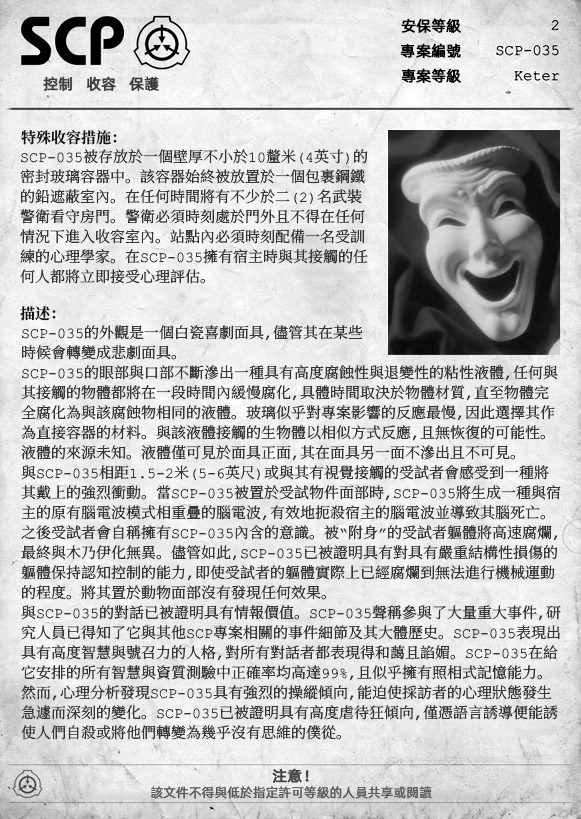
<style>
.page{position:relative;width:581px;height:819px}
.page>*{position:absolute;margin:0}
.t1{font:15px "AlibabaPuHuiTiR";color:#000000;font-weight:bold}
.t2{font:15px "AlibabaPuHuiTiR";color:#3d3d3d;font-weight:bold}
.t3{font:15px "ContainmentBreach-Bold";color:#121212}
.t4{font:15px/20px "ContainmentBreach-Regular";color:#353535}
.t5{font:15px "AlibabaPuHuiTiR";color:#414141;font-weight:bold}
.t6{font:13px "AlibabaPuHuiTiR";color:#575757}
</style>
<div class="page">
<p class="t1" style="left:401px;top:18px;width:60px;height:15px">安保等級</p>
<p class="t1" style="left:400px;top:43px;width:61px;height:15px">專案編號</p>
<p class="t2" style="left:43px;top:76px;width:116px;height:15px">控制   收容   保護</p>
<p class="t1" style="left:401px;top:68px;width:60px;height:15px">專案等級</p>
<p class="t3" style="left:21px;top:130px;width:96px;height:15px">特殊收容措施：</p>
<p class="t4" style="left:20px;top:149px;width:348px;height:135px">SCP-035被存放於一個壁厚不小於10釐米（4英寸）的<br>密封玻璃容器中。該容器始終被放置於一個包裹鋼鐵<br>的鉛遮蔽室內。在任何時間將有不少於二（2）名武裝<br>警衛看守房門。警衛必須時刻處於門外且不得在任何<br>情況下進入收容室內。站點內必須時刻配備一名受訓<br>練的心理學家。在SCP-035擁有宿主時與其接觸的任<br>何人都將立即接受心理評估。</p>
<p class="t3" style="left:20px;top:306px;width:36px;height:15px">描述：</p>
<p class="t4" style="left:21px;top:325px;width:540px;height:415px">SCP-035的外觀是一個白瓷喜劇面具，儘管其在某些<br>時候會轉變成悲劇面具。<br>SCP-035的眼部與口部不斷滲出一種具有高度腐蝕性與退變性的粘性液體，任何與<br>其接觸的物體都將在一段時間內緩慢腐化，具體時間取決於物體材質，直至物體完<br>全腐化為與該腐蝕物相同的液體。玻璃似乎對專案影響的反應最慢，因此選擇其作<br>為直接容器的材料。與該液體接觸的生物體以相似方式反應，且無恢復的可能性。<br>液體的來源未知。液體僅可見於面具正面，其在面具另一面不滲出且不可見。<br>與SCP-035相距1.5-2米（5-6英尺）或與其有視覺接觸的受試者會感受到一種將<br>其戴上的強烈衝動。當SCP-035被置於受試物件面部時，SCP-035將生成一種與宿<br>主的原有腦電波模式相重疊的腦電波，有效地扼殺宿主的腦電波並導致其腦死亡。<br>之後受試者會自稱擁有SCP-035內含的意識。被“附身”的受試者軀體將高速腐爛，<br>最終與木乃伊化無異。儘管如此，SCP-035已被證明具有對具有嚴重結構性損傷的<br>軀體保持認知控制的能力，即使受試者的軀體實際上已經腐爛到無法進行機械運動<br>的程度。將其置於動物面部沒有發現任何效果。<br>與SCP-035的對話已被證明具有情報價值。SCP-035聲稱參與了大量重大事件，研<br>究人員已得知了它與其他SCP專案相關的事件細節及其大體歷史。SCP-035表現出<br>具有高度智慧與號召力的人格，對所有對話者都表現得和藹且諂媚。SCP-035在給<br>它安排的所有智慧與資質測驗中正確率均高達99%，且似乎擁有照相式記憶能力。<br>然而，心理分析發現SCP-035具有強烈的操縱傾向，能迫使採訪者的心理狀態發生<br>急遽而深刻的變化。SCP-035已被證明具有高度虐待狂傾向，僅憑語言誘導便能誘<br>使人們自殺或將他們轉變為幾乎沒有思維的僕從。</p>
<p class="t5" style="left:272px;top:768px;width:37px;height:15px">注意！</p>
<p class="t6" style="left:151px;top:786px;width:281px;height:13px">該文件不得與低於指定許可等級的人員共享或閱讀</p>
</div>
